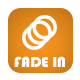
<style>
.page{position:relative;width:80px;height:80px;background:#ffffff}
.page>*{position:absolute;margin:0}
.t1{font:15px "Bauhaus93";color:#ffffff}
</style>
<div class="page">
<p class="t1" style="left:14px;top:56px;width:51px;height:11px">FADE IN</p>
</div>
